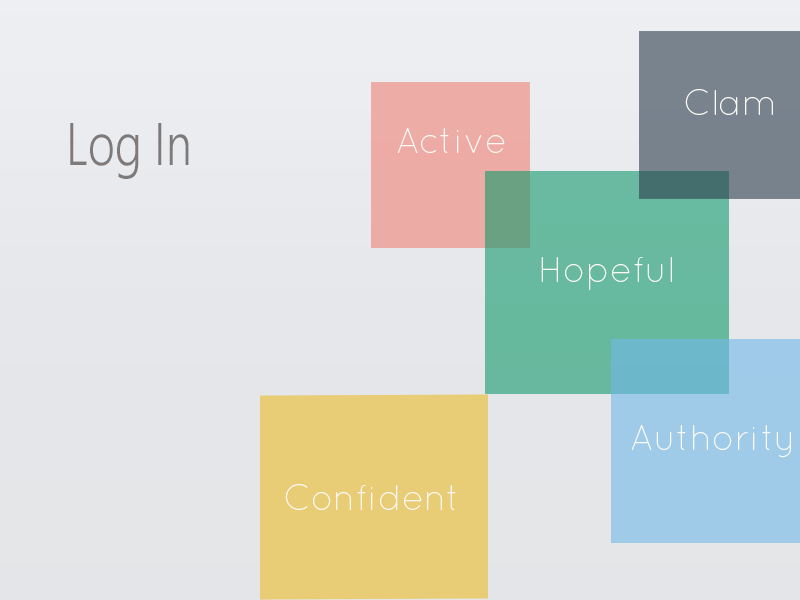
<style>
.page{position:relative;width:800px;height:600px}
.page>*{position:absolute;margin:0}
.t1{font:36px "Quicksand-Light";color:#fafaf5}
.t2{font:60px "NirmalaUI-Semilight";color:#7f7a7a;scale:0.78 1}
</style>
<div class="page">
<p class="t1" style="left:685px;top:89px;width:88px;height:26px">Clam</p>
<p class="t2" style="left:70px;top:123px;width:119px;height:56px">Log In</p>
<p class="t1" style="left:397px;top:128px;width:108px;height:25px">Active</p>
<p class="t1" style="left:541px;top:257px;width:131px;height:33px">Hopeful</p>
<p class="t1" style="left:631px;top:425px;width:160px;height:33px">Authority</p>
<p class="t1" style="left:285px;top:484px;width:171px;height:26px">Confident</p>
</div>
